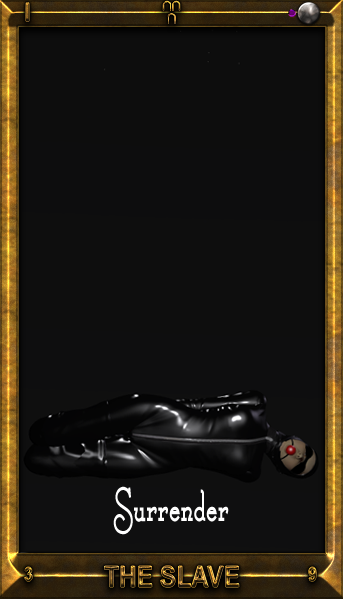
<style>
.page{position:relative;width:343px;height:599px}
.page>*{position:absolute;margin:0}
.t1{font:30px "AegyptusBold"}
.t2{font:53.4px "CalamityJaneNF-Bold";color:#ffffff;scale:0.61 1}
.t3{font:19.4px "Arial-BoldMT";scale:0.84 1}
.t4{font:29.3px "Arial-BoldMT";scale:0.84 1}
</style>
<div class="page">
<p class="t1" style="left:163px;top:1px;width:17px;height:23px">󴣡</p>
<p class="t2" style="left:113px;top:486px;width:116px;height:49px">Surrender</p>
<p class="t3" style="left:24px;top:567px;width:9px;height:15px">3</p>
<p class="t4" style="left:104px;top:565px;width:135px;height:23px">THE SLAVE</p>
<p class="t3" style="left:308px;top:567px;width:9px;height:15px">9</p>
</div>
